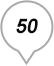
<style>
.page{position:relative;width:54px;height:66px;background:#ffffff}
.page>*{position:absolute;margin:0}
.t1{font:20px "Arial-BoldMT";color:#0c0b0b;font-style:italic}
</style>
<div class="page">
<p class="t1" style="left:16px;top:18px;width:22px;height:16px">50</p>
</div>
